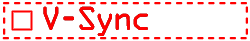
<style>
.page{position:relative;width:250px;height:41px;background:#ffffff}
.page>*{position:absolute;margin:0}
.t1{font:18px "OCRAStd";letter-spacing:-0.12em;color:#ff0000}
.t2{font:30px "OCRAStd";letter-spacing:-0.12em;color:#ff0000}
</style>
<div class="page">
<p class="t1" style="left:3px;top:2px;width:244px;height:3px">-----------------------</p>
<p class="t1" style="left:3px;top:6px;width:3px;height:29px;rotate:-90deg">---</p>
<p class="t2" style="left:43px;top:6px;width:105px;height:30px">V-Sync</p>
<p class="t2" style="left:43px;top:6px;width:105px;height:30px">V-Sync</p>
<p class="t2" style="left:43px;top:6px;width:105px;height:30px">V-Sync</p>
<p class="t1" style="left:245px;top:6px;width:3px;height:29px;rotate:-90deg">---</p>
<p class="t1" style="left:2px;top:37px;width:245px;height:3px">-----------------------</p>
</div>
